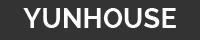
<style>
.page{position:relative;width:200px;height:40px;background:#333333}
.page>*{position:absolute;margin:0}
.t1{font:26.9px "Raleway-Bold";letter-spacing:0.01em;color:#fdfdfe;text-transform:uppercase}
</style>
<div class="page">
<p class="t1" style="left:23px;top:8px;width:153px;height:20px">yunhouse</p>
</div>
